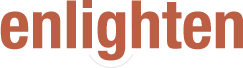
<style>
.page{position:relative;width:243px;height:68px;background:#ffffff}
.page>*{position:absolute;margin:0}
.t1{font:66.7px "HelveticaNeueLTCom-BdCn";color:#bc5e43}
</style>
<div class="page">
<p class="t1" style="left:0px;top:0px;width:243px;height:61px">enlighten</p>
</div>
